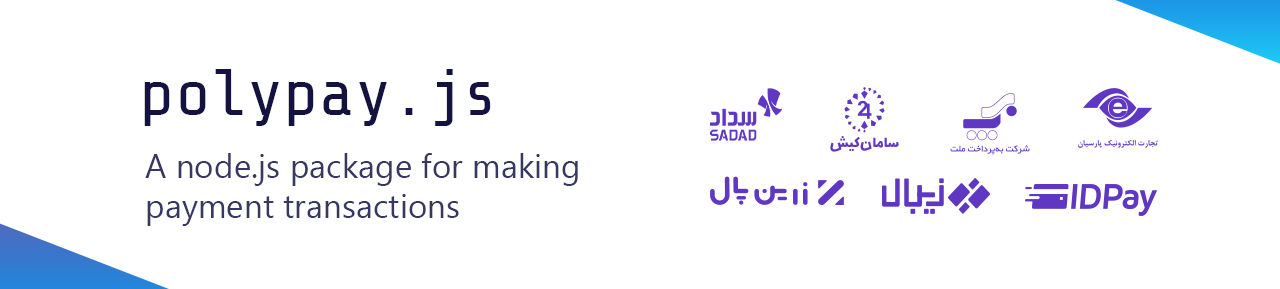
<style>
.page{position:relative;width:1280px;height:289px;background:#ffffff}
.page>*{position:absolute;margin:0}
.t1{font:66.7px "ShareTechMono-Regular";color:#141240}
.t2{font:33.3px "SegoeUI";color:#363861}
</style>
<div class="page">
<p class="t1" style="left:144px;top:69px;width:347px;height:57px">polypay.js</p>
<p class="t2" style="left:145px;top:153px;width:433px;height:73px">A node.js package for making payment transactions</p>
</div>
